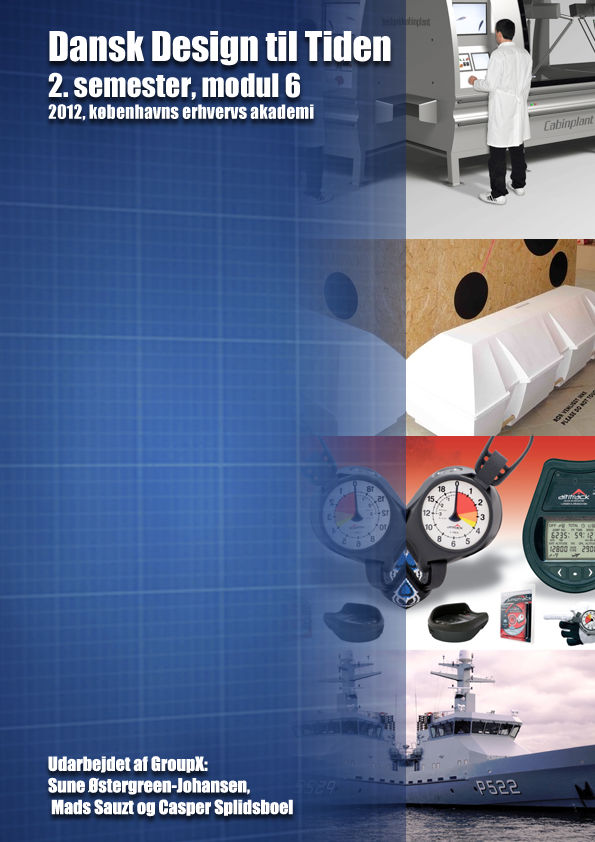
<style>
.page{position:relative;width:595px;height:842px}
.page>*{position:absolute;margin:0}
.t1{font:18px "Impact";color:#ffffff}
.t2{font:38px "Impact";color:#ffffff}
.t3{font:30px "Impact";color:#ffffff}
</style>
<div class="page">
<p class="t1" style="left:48px;top:31px;width:343px;height:90px"><span class="t2">Dansk Design til Tiden<br></span><span class="t3">2. semester, modul 6<br></span>2012, københavns erhvervs akademi</p>
<p class="t1" style="left:48px;top:756px;width:245px;height:61px">Udarbejdet af GroupX:<br>Sune Østergreen-Johansen,<br> Mads Sauzt og Casper Splidsboel</p>
</div>
